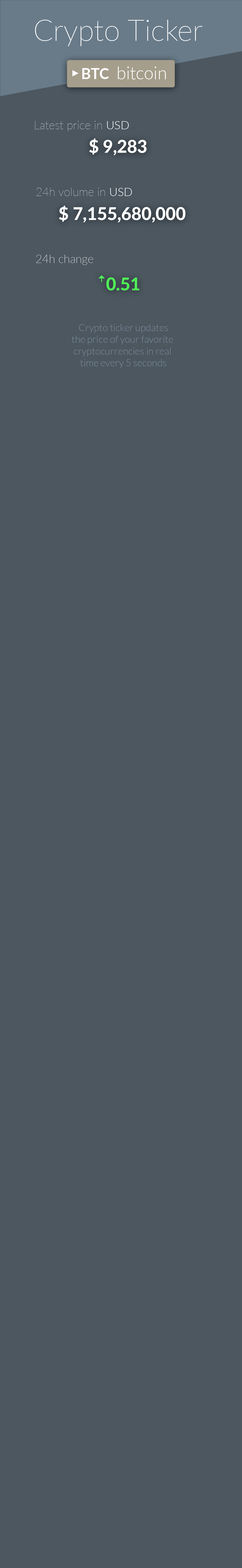
<style>
.page{position:relative;width:242px;height:1568px;background:#4c5760}
.page>*{position:absolute;margin:0}
.t1{font:29.5px "Lato-Thin";color:#ffffff}
.t2{font:8.9px "TimesNewRomanPSMT";color:#ffffff}
.t3{font:14.7px "Lato-Bold";color:#ffffff}
.t4{font:17.4px "Lato-Light";color:#ffffff}
.t5{font:11.5px "Lato-Hairline";color:#ffffff}
.t6{font:11.5px "Lato-Light";color:#ffffff}
.t7{font:17.4px "Lato-Heavy";color:#ffffff}
.t8{font:11.5px "Lato-Thin";color:#ffffff}
.t9{font:17.4px "Lato-Heavy";color:#4fee57}
.t10{font:17.4px "TimesNewRomanPSMT";color:#4fee57}
.t11{font:9.7px "Lato-Light";color:#778795}
</style>
<div class="page">
<p class="t1" style="left:35px;top:20px;width:167px;height:26px">Crypto Ticker</p>
<p class="t2" style="left:72px;top:70px;width:7px;height:7px;rotate:-90deg">▼</p>
<p class="t3" style="left:82px;top:68px;width:27px;height:11px">BTC</p>
<p class="t4" style="left:118px;top:67px;width:48px;height:13px">bitcoin</p>
<p class="t5" style="left:35px;top:121px;width:94px;height:10px">Latest price in <span class="t6">USD</span></p>
<p class="t7" style="left:89px;top:138px;width:57px;height:17px">$ 9,283</p>
<p class="t5" style="left:36px;top:187px;width:96px;height:9px">24h volume in <span class="t6">USD</span></p>
<p class="t7" style="left:59px;top:206px;width:126px;height:17px">$ 7,155,680,000</p>
<p class="t8" style="left:36px;top:255px;width:57px;height:10px">24h change</p>
<p class="t9" style="left:98px;top:275px;width:41px;height:16px"><span class="t10">ꜛ</span>0.51</p>
<p class="t11" style="left:72px;top:324px;width:101px;height:44px;text-align:center">Crypto ticker updates<br>the price of your favorite <br>cryptocurrencies in real <br>time every 5 seconds</p>
</div>
